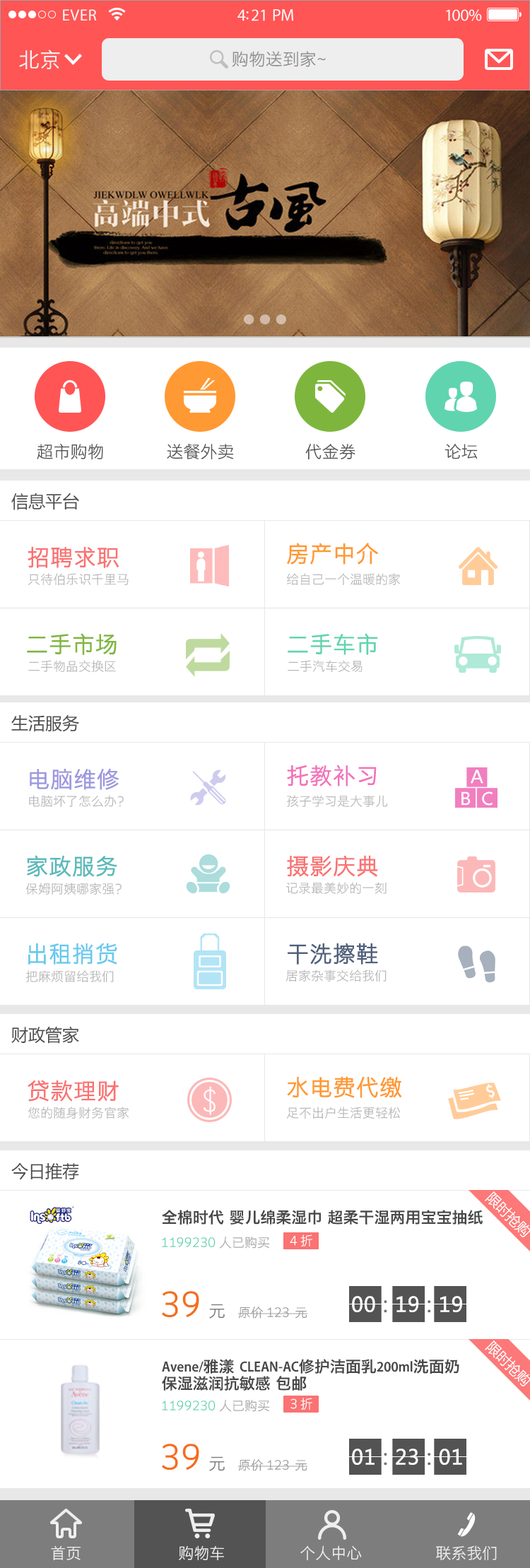
<style>
.page{position:relative;width:530px;height:1568px;background:#ffffff}
.page>*{position:absolute;margin:0}
.t1{font:21.2px "STHeitiSC-Light";color:#f2f2f2}
.t2{font:17px "STHeitiSC-Light";color:#8e8c8c}
.t3{font:17px "STHeitiSC-Light";color:#575454}
.t4{font:17px "MicrosoftYaHei";color:#4e4e4e}
.t5{font:22.6px "STHeitiSC-Light";color:#ff9933;font-weight:bold}
.t6{font:22.6px "STHeitiSC-Light";color:#fa7272;font-weight:bold}
.t7{font:12.7px "STHeitiSC-Light";color:#b8b8b8}
.t8{font:22.6px "STHeitiSC-Light";color:#7eb63d;font-weight:bold}
.t9{font:22.6px "STHeitiSC-Light";color:#60d4af;font-weight:bold}
.t10{font:22.6px "STHeitiSC-Light";color:#9d98e0;font-weight:bold}
.t11{font:22.6px "STHeitiSC-Light";color:#f274bb;font-weight:bold}
.t12{font:22.6px "STHeitiSC-Light";color:#5abab9;font-weight:bold}
.t13{font:22.6px "STHeitiSC-Light";color:#67c9ee;font-weight:bold}
.t14{font:22.6px "STHeitiSC-Light";color:#50617b;font-weight:bold}
.t15{font:15.5px "STHeitiSC-Medium";color:#484848}
.t16{font:12.7px "STHeitiSC-Light";color:#60d4af}
.t17{font:12.7px "STHeitiSC-Light";color:#a6a5a5}
.t18{font:12.7px "STHeitiSC-Light";color:#ffffff}
.t19{font:33.9px "STHeitiSC-Light";color:#f66d1a}
.t20{font:17px "STHeitiSC-Light";color:#7f7f7f}
.t21{font:20.5px "MicrosoftYaHei";color:#ffffff;font-weight:bold}
.t22{font:20.5px "MicrosoftYaHei";color:#747474;font-weight:bold}
.t23{font:20.5px "MicrosoftYaHei";color:#6c6c6c;font-weight:bold}
.t24{font:12.7px "STHeitiSC-Light";color:#9a9a9a}
.t25{font:15.5px/17px "STHeitiSC-Medium";color:#484848}
.t26{font:15.5px "STHeitiSC-Light";color:#eeeeee}
</style>
<div class="page">
<p class="t1" style="left:19px;top:49px;width:41px;height:20px">北京</p>
<p class="t2" style="left:232px;top:51px;width:94px;height:16px">购物送到家~</p>
<p class="t3" style="left:37px;top:443px;width:66px;height:17px">超市购物</p>
<p class="t3" style="left:167px;top:444px;width:67px;height:15px">送餐外卖</p>
<p class="t3" style="left:305px;top:444px;width:50px;height:16px">代金券</p>
<p class="t3" style="left:444px;top:444px;width:34px;height:15px">论坛</p>
<p class="t4" style="left:11px;top:493px;width:68px;height:17px">信息平台</p>
<p class="t5" style="left:287px;top:543px;width:91px;height:22px">房产中介</p>
<p class="t6" style="left:28px;top:546px;width:91px;height:22px">招聘求职</p>
<p class="t7" style="left:28px;top:573px;width:101px;height:12px">只待伯乐识千里马</p>
<p class="t7" style="left:287px;top:573px;width:114px;height:12px">给自己一个温暖的家</p>
<p class="t8" style="left:27px;top:633px;width:90px;height:22px">二手市场</p>
<p class="t9" style="left:288px;top:633px;width:90px;height:22px">二手车市</p>
<p class="t7" style="left:28px;top:660px;width:88px;height:12px">二手物品交换区</p>
<p class="t7" style="left:288px;top:660px;width:74px;height:12px">二手汽车交易</p>
<p class="t4" style="left:11px;top:714px;width:68px;height:18px">生活服务</p>
<p class="t10" style="left:30px;top:768px;width:89px;height:22px">电脑维修</p>
<p class="t11" style="left:287px;top:765px;width:90px;height:21px">托教补习</p>
<p class="t7" style="left:29px;top:795px;width:95px;height:12px">电脑坏了怎么办？</p>
<p class="t7" style="left:286px;top:795px;width:102px;height:12px">孩子学习是大事儿</p>
<p class="t12" style="left:27px;top:855px;width:90px;height:22px">家政服务</p>
<p class="t6" style="left:287px;top:855px;width:91px;height:22px">摄影庆典</p>
<p class="t7" style="left:286px;top:882px;width:101px;height:12px">记录最美妙的一刻</p>
<p class="t7" style="left:25px;top:883px;width:97px;height:12px">保姆阿姨哪家强？</p>
<p class="t13" style="left:28px;top:943px;width:89px;height:22px">出租捎货</p>
<p class="t14" style="left:288px;top:943px;width:90px;height:22px">干洗擦鞋</p>
<p class="t7" style="left:25px;top:970px;width:89px;height:12px">把麻烦留给我们</p>
<p class="t7" style="left:285px;top:969px;width:102px;height:13px">居家杂事交给我们</p>
<p class="t4" style="left:11px;top:1026px;width:68px;height:18px">财政管家</p>
<p class="t6" style="left:28px;top:1080px;width:91px;height:22px">贷款理财</p>
<p class="t5" style="left:287px;top:1076px;width:115px;height:22px">水电费代缴</p>
<p class="t7" style="left:28px;top:1107px;width:101px;height:12px">您的随身财务官家</p>
<p class="t7" style="left:286px;top:1107px;width:115px;height:12px">足不出户生活更轻松</p>
<p class="t4" style="left:11px;top:1163px;width:68px;height:17px">今日推荐</p>
<p class="t15" style="left:162px;top:1210px;width:321px;height:15px">全棉时代 婴儿绵柔湿巾 超柔干湿两用宝宝抽纸</p>
<p class="t16" style="left:162px;top:1237px;width:107px;height:12px">1199230 <span class="t17">人已购买</span></p>
<p class="t18" style="left:290px;top:1234px;width:22px;height:12px">4 折</p>
<p class="t19" style="left:162px;top:1291px;width:63px;height:28px">39 <span class="t20">元</span></p>
<p class="t21" style="left:352px;top:1296px;width:110px;height:17px">00<span class="t22"> :</span> 19 <span class="t23">:</span> 19</p>
<p class="t24" style="left:237px;top:1307px;width:71px;height:12px">原价 123  元</p>
<p class="t25" style="left:162px;top:1359px;width:297px;height:32px">Avene/雅漾 CLEAN-AC修护洁面乳200ml洗面奶 <br>保湿滋润抗敏感 包邮</p>
<p class="t18" style="left:290px;top:1398px;width:22px;height:12px">3 折</p>
<p class="t16" style="left:162px;top:1400px;width:107px;height:12px">1199230 <span class="t17">人已购买</span></p>
<p class="t19" style="left:162px;top:1444px;width:63px;height:27px">39 <span class="t20">元</span></p>
<p class="t21" style="left:352px;top:1449px;width:110px;height:17px">01<span class="t22"> :</span> 23 <span class="t23">:</span> 01</p>
<p class="t24" style="left:237px;top:1459px;width:71px;height:12px">原价 123  元</p>
<p class="t26" style="left:51px;top:1545px;width:30px;height:15px">首页</p>
<p class="t26" style="left:179px;top:1545px;width:45px;height:15px">购物车</p>
<p class="t26" style="left:300px;top:1545px;width:62px;height:15px">个人中心</p>
<p class="t26" style="left:436px;top:1545px;width:61px;height:15px">联系我们</p>
</div>
